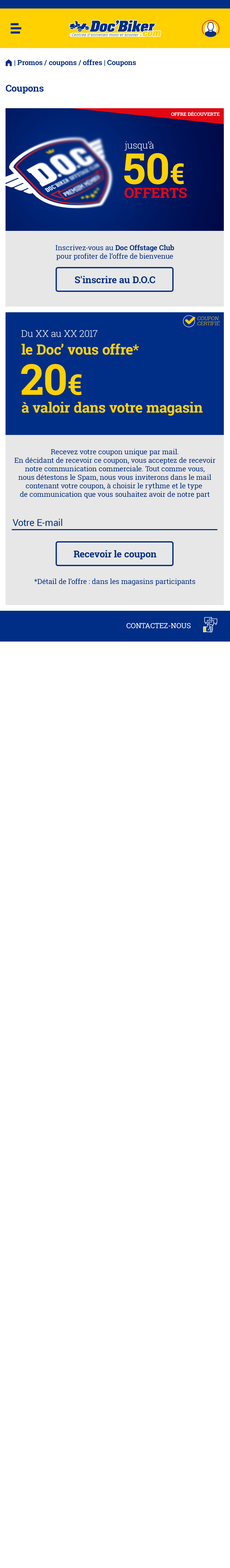
<style>
.page{position:relative;width:230px;height:1568px;background:#ffffff}
.page>*{position:absolute;margin:0}
.t1{font:7.1px "RobotoSlab-Bold";color:#002e86}
.t2{font:7.1px "FoundationIconsGeneral-Reg";color:#002e86}
.t3{font:9.5px "RobotoSlab-Bold";color:#002e86}
.t4{font:4.7px "RobotoSlab-Bold";color:#ffffff;text-transform:uppercase}
.t5{font:9.5px "RobotoSlab-Light";color:#ffffff}
.t6{font:42.6px "RobotoSlab-Bold";color:#ffd100}
.t7{font:28.4px "RobotoSlab-Bold";color:#ffd100}
.t8{font:14.2px "RobotoSlab-Bold";color:#e30613;text-transform:uppercase}
.t9{font:7.1px "RobotoSlab-Regular";color:#002e86}
.t10{font:5.1px/5.1px "RobotoSlab-Light";color:#ffcd00;text-transform:uppercase;font-style:italic}
.t11{font:14.2px "RobotoSlab-Bold";color:#ffd100}
.t12{font:9.5px "Roboto-Regular";color:#002e86}
.t13{font:7.1px "RobotoSlab-Regular";color:#ffffff;text-transform:uppercase}
</style>
<div class="page">
<p class="t1" style="left:6px;top:59px;width:130px;height:8px"><span class="t2">m </span>| Promos / coupons / offres | Coupons</p>
<p class="t3" style="left:6px;top:85px;width:38px;height:9px">Coupons</p>
<p class="t4" style="left:171px;top:112px;width:48px;height:4px">Offre découverte</p>
<p class="t5" style="left:124px;top:141px;width:29px;height:10px">jusqu’à</p>
<p class="t6" style="left:124px;top:153px;width:59px;height:32px">50<span class="t7">€</span></p>
<p class="t8" style="left:124px;top:187px;width:62px;height:11px">offerts</p>
<p class="t9" style="left:55px;top:245px;width:119px;height:15px;text-align:center">Inscrivez-vous au <span class="t1">Doc Offstage Club<br></span>pour profiter de l’offre de bienvenue</p>
<p class="t3" style="left:75px;top:276px;width:80px;height:7px">S'inscrire au D.O.C</p>
<p class="t10" style="left:197px;top:317px;width:22px;height:8px">coupon<br>certifié</p>
<p class="t5" style="left:21px;top:330px;width:76px;height:7px">Du XX au XX 2017</p>
<p class="t11" style="left:21px;top:344px;width:118px;height:11px">le Doc’ vous offre*</p>
<p class="t6" style="left:21px;top:364px;width:60px;height:31px">20<span class="t7">€</span></p>
<p class="t11" style="left:22px;top:402px;width:180px;height:14px">à valoir dans votre magasin</p>
<p class="t9" style="left:14px;top:449px;width:201px;height:49px;text-align:center">Recevez votre coupon unique par mail.<br>En décidant de recevoir ce coupon, vous acceptez de recevoir<br>notre communication commerciale. Tout comme vous,<br>nous détestons le Spam, nous vous inviterons dans le mail<br>contenant votre coupon, à choisir le rythme et le type <br>de communication que vous souhaitez avoir de notre part</p>
<p class="t12" style="left:13px;top:519px;width:49px;height:7px">Votre E-mail</p>
<p class="t3" style="left:74px;top:550px;width:82px;height:9px">Recevoir le coupon</p>
<p class="t9" style="left:34px;top:578px;width:161px;height:7px">*Détail de l’offre : dans les magasins participants</p>
<p class="t13" style="left:126px;top:623px;width:64px;height:5px">contactez-nous</p>
</div>
